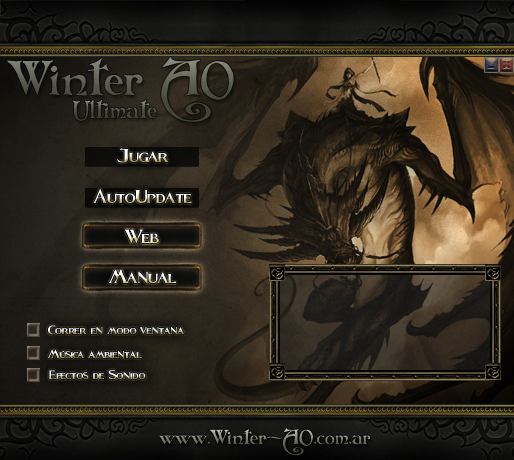
<style>
.page{position:relative;width:514px;height:460px}
.page>*{position:absolute;margin:0}
.t1{font:48px "Folkard"}
.t2{font:24px "Folkard";color:#4e4f41}
.t3{font:36px "Fleet-Street"}
.t4{font:36px "Fleet-Street";color:#ffffff}
.t5{font:23px "Fleet-Street"}
.t6{font:20px "Folkard"}
</style>
<div class="page">
<p class="t1" style="left:7px;top:57px;width:227px;height:65px">Winter AO</p>
<p class="t2" style="left:72px;top:99px;width:85px;height:22px">Ultimate</p>
<p class="t3" style="left:117px;top:148px;width:52px;height:15px">Jugar</p>
<p class="t3" style="left:93px;top:188px;width:99px;height:15px">AutoUpdate</p>
<p class="t4" style="left:125px;top:229px;width:34px;height:14px">Web</p>
<p class="t3" style="left:109px;top:269px;width:68px;height:15px">Manual</p>
<p class="t5" style="left:47px;top:325px;width:137px;height:10px">Correr en modo ventana</p>
<p class="t5" style="left:48px;top:349px;width:94px;height:10px">Música ambiental</p>
<p class="t5" style="left:49px;top:369px;width:97px;height:11px">Efectos de Sonido</p>
<p class="t6" style="left:158px;top:428px;width:213px;height:27px">www.Winter-AO.com.ar</p>
</div>
